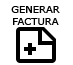
<style>
.page{position:relative;width:73px;height:65px;background:#ffffff}
.page>*{position:absolute;margin:0}
.t1{font:10px "MSReferenceSansSerif";color:#000000}
</style>
<div class="page">
<p class="t1" style="left:11px;top:6px;width:49px;height:19px;text-align:center">GENERAR<br>FACTURA</p>
</div>
